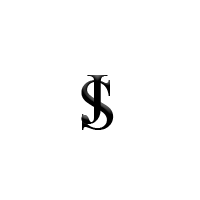
<style>
.page{position:relative;width:200px;height:200px;background:#ffffff}
.page>*{position:absolute;margin:0}
.t1{font:72px "TimesNewRomanPSMT";color:#000000}
</style>
<div class="page">
<p class="t1" style="left:81px;top:75px;width:27px;height:49px">J</p>
<p class="t1" style="left:81px;top:80px;width:33px;height:50px">S</p>
</div>
